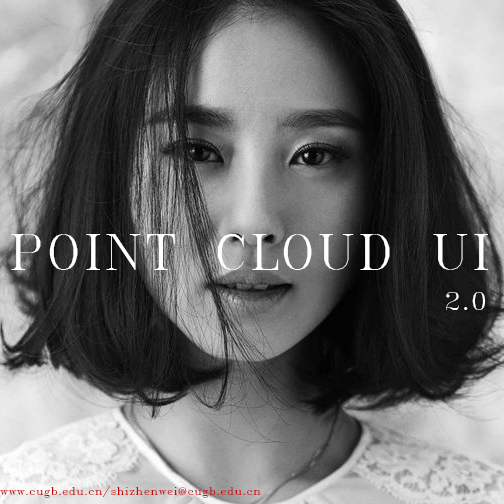
<style>
.page{position:relative;width:504px;height:504px}
.page>*{position:absolute;margin:0}
.t1{font:48px "RomanT";color:#ffffff}
.t2{font:24px "RomanT";color:#ffffff}
.t3{font:10px "RomanT";color:#c90808}
</style>
<div class="page">
<p class="t1" style="left:11px;top:234px;width:477px;height:36px">POINT CLOUD UI</p>
<p class="t2" style="left:446px;top:292px;width:40px;height:18px">2.0</p>
<p class="t3" style="left:0px;top:486px;width:261px;height:12px">www.cugb.edu.cn/shizhenwei@cugb.edu.cn</p>
</div>
